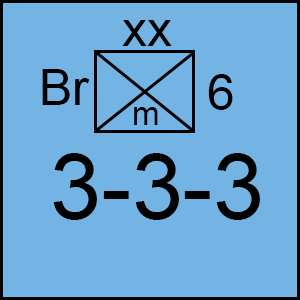
<style>
.page{position:relative;width:300px;height:300px;background:#74b4e4}
.page>*{position:absolute;margin:0}
.t1{font:50px "ArialMT";color:#000000}
.t2{font:33.3px "ArialMT";color:#000000}
.t3{font:91.7px "ArialMT";color:#000000}
</style>
<div class="page">
<p class="t1" style="left:122px;top:20px;width:50px;height:26px">xx</p>
<p class="t1" style="left:42px;top:69px;width:48px;height:36px">Br</p>
<p class="t1" style="left:208px;top:74px;width:25px;height:36px">6</p>
<p class="t2" style="left:134px;top:107px;width:24px;height:18px">m</p>
<p class="t3" style="left:53px;top:153px;width:207px;height:67px">3-3-3</p>
</div>
